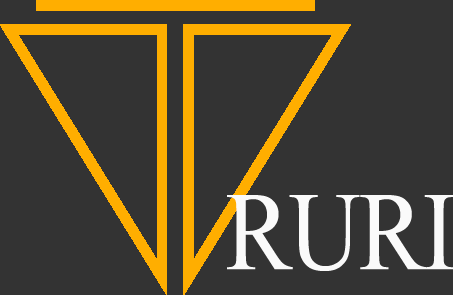
<style>
.page{position:relative;width:453px;height:295px;background:#333333}
.page>*{position:absolute;margin:0}
.t1{font:111.9px "TimesNewRomanPSMT";letter-spacing:-0.025em;color:#fafafa;scale:0.89 1}
</style>
<div class="page">
<p class="t1" style="left:227px;top:195px;width:226px;height:76px">RURI</p>
</div>
